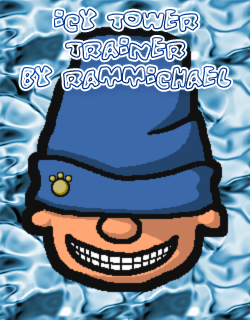
<style>
.page{position:relative;width:250px;height:320px}
.page>*{position:absolute;margin:0}
.t1{font:24px "Vitaminoutlined";color:#073a93}
</style>
<div class="page">
<p class="t1" style="left:20px;top:8px;width:212px;height:82px;text-align:center">Icy Tower Trainer<br>By RaMMicHaeL</p>
</div>
